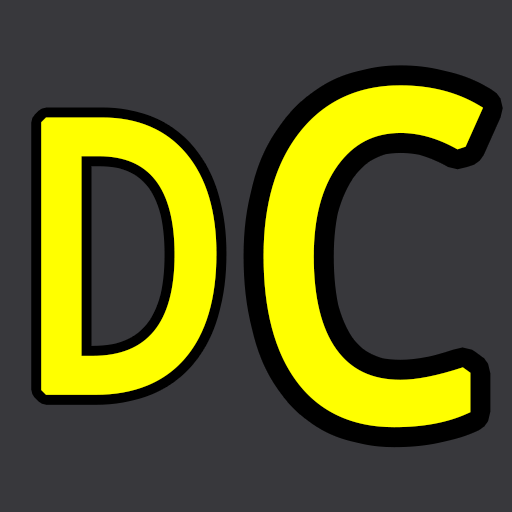
<style>
.page{position:relative;width:512px;height:512px;background:#38383c}
.page>*{position:absolute;margin:0}
.t1{font:450px "NotoMono";color:#ffff00;font-weight:bold;scale:0.89 1}
.t2{font:375px "NotoMono";color:#ffff00;font-weight:bold;scale:0.89 1}
</style>
<div class="page">
<p class="t1" style="left:263px;top:85px;width:220px;height:343px">C</p>
<p class="t2" style="left:41px;top:117px;width:176px;height:278px">D</p>
</div>
